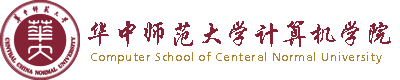
<style>
.page{position:relative;width:400px;height:80px;background:#ffffff}
.page>*{position:absolute;margin:0}
.t1{font:28px "STXingkai";color:#852235}
.t2{font:12px "Articulate";letter-spacing:0.05em;color:#aa8230}
</style>
<div class="page">
<p class="t1" style="left:88px;top:21px;width:303px;height:26px">华中师范大学计算机学院</p>
<p class="t2" style="left:91px;top:52px;width:291px;height:12px">Computer School of Centeral Normal University</p>
</div>
